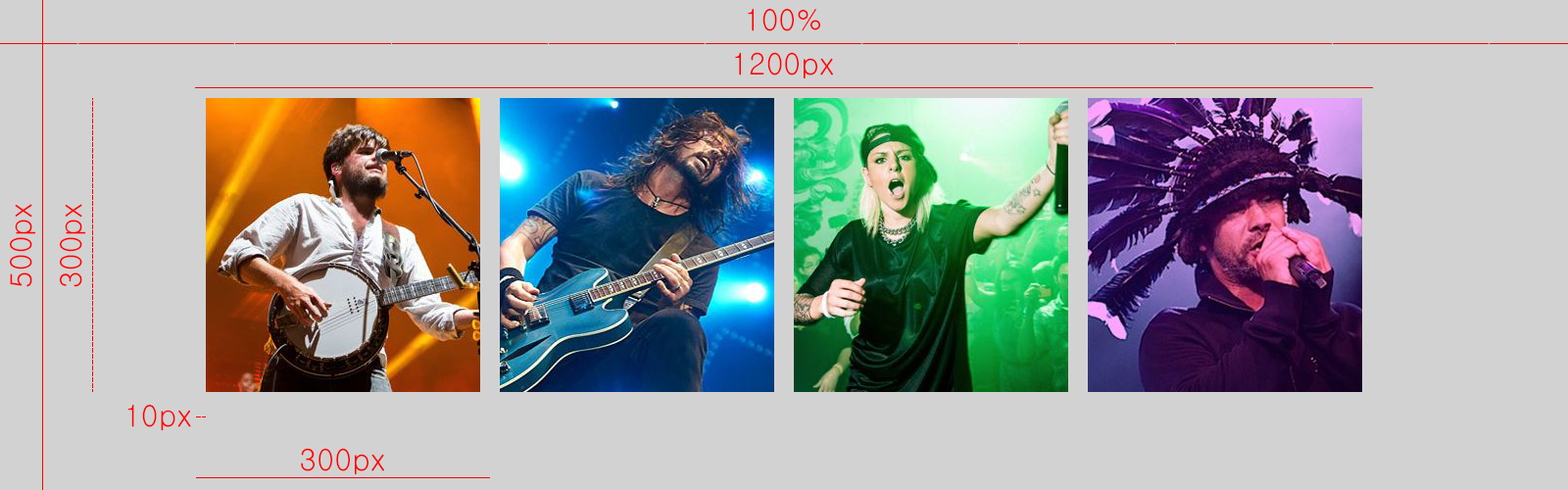
<style>
.page{position:relative;width:1568px;height:490px;background:#d2d2d2}
.page>*{position:absolute;margin:0}
.t1{font:29.4px "Gulim";letter-spacing:0.03em;color:#ff0000}
.t2{font:29.7px "Gulim";letter-spacing:0.03em;color:#ff0000}
</style>
<div class="page">
<p class="t1" style="left:748px;top:9px;width:72px;height:22px">100%</p>
<p class="t2" style="left:735px;top:52px;width:98px;height:27px">1200px</p>
<p class="t1" style="left:10px;top:204px;width:26px;height:83px;rotate:-90deg">500px</p>
<p class="t1" style="left:60px;top:204px;width:26px;height:83px;rotate:-90deg">300px</p>
<p class="t1" style="left:127px;top:405px;width:64px;height:26px">10px</p>
<p class="t2" style="left:301px;top:448px;width:83px;height:27px">300px</p>
</div>
